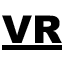
<style>
.page{position:relative;width:64px;height:64px;background:#ffffff}
.page>*{position:absolute;margin:0}
.t1{font:38.4px "Arial-Black";color:#000000}
</style>
<div class="page">
<p class="t1" style="left:2px;top:15px;width:60px;height:28px">VR</p>
</div>
